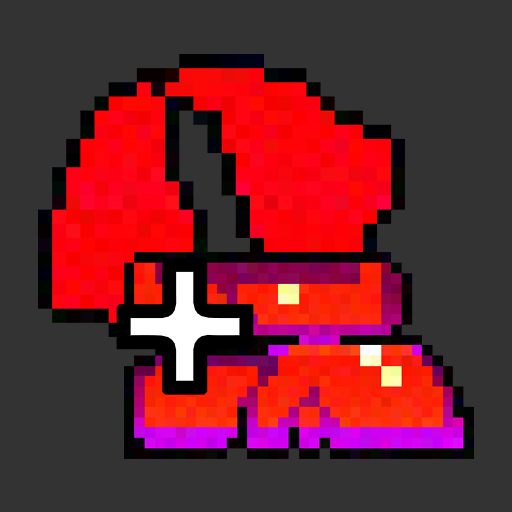
<style>
.page{position:relative;width:512px;height:512px;background:#333333}
.page>*{position:absolute;margin:0}
.t1{font:223px "kandinsky";font-weight:bold}
</style>
<div class="page">
<p class="t1" style="left:116px;top:257px;width:138px;height:138px">+</p>
</div>
